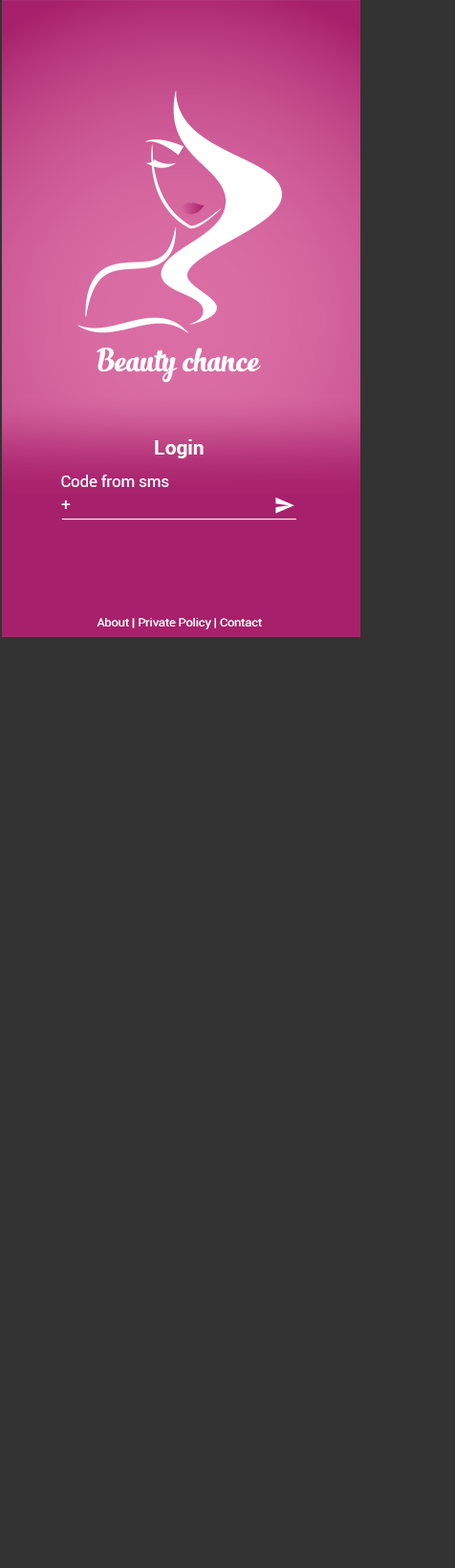
<style>
.page{position:relative;width:455px;height:1568px;background:#333333}
.page>*{position:absolute;margin:0}
.t1{font:23.9px "SlimTony-Italic";color:#ffffff}
.t2{font:19.9px "Roboto-Bold";color:#ffffff}
.t3{font:15.9px "Roboto-Regular";color:#ffffff}
.t4{font:11.9px "Roboto-Regular";color:#ffffff}
</style>
<div class="page">
<p class="t1" style="left:96px;top:348px;width:165px;height:35px">Beauty chance</p>
<p class="t2" style="left:155px;top:439px;width:48px;height:19px">Login</p>
<p class="t3" style="left:61px;top:475px;width:108px;height:12px">Code from sms</p>
<p class="t3" style="left:61px;top:500px;width:10px;height:9px">+</p>
<p class="t4" style="left:96px;top:618px;width:166px;height:11px">About | Private Policy | Contact</p>
</div>
